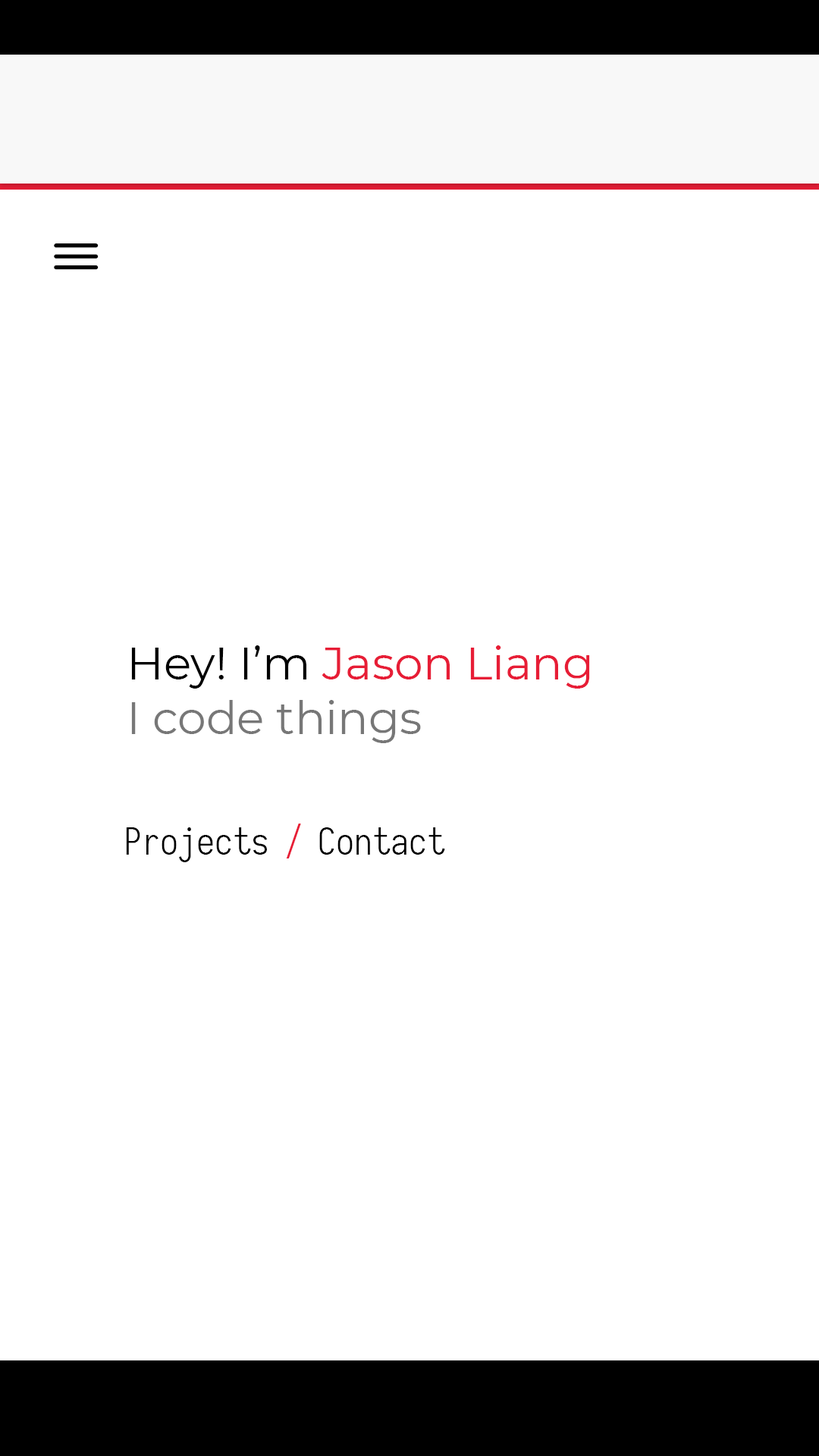
<style>
.page{position:relative;width:819px;height:1456px;background:#ffffff}
.page>*{position:absolute;margin:0}
.t1{font:45.5px "Montserrat-Regular";color:#777777}
.t2{font:45.5px "Montserrat-Regular";color:#000000}
.t3{font:45.5px "Montserrat-Regular";color:#e71d36}
.t4{font:36.4px "IosevkaNerdFontComplete-Light";color:#000000}
.t5{font:36.4px "Montserrat-Regular";color:#e71d36}
</style>
<div class="page">
<p class="t1" style="left:131px;top:645px;width:459px;height:98px"><span class="t2">Hey! I’m </span><span class="t3">Jason Liang<br></span>I code things</p>
<p class="t4" style="left:126px;top:824px;width:319px;height:38px">Projects <span class="t5">/</span> Contact</p>
</div>
